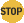
<style>
.page{position:relative;width:24px;height:23px;background:#ebbc41}
.page>*{position:absolute;margin:0}
.t1{font:9.8px "BellGothicStd-Black";letter-spacing:-0.1em;color:#292929}
</style>
<div class="page">
<p class="t1" style="left:0px;top:7px;width:22px;height:8px">STOP</p>
</div>
